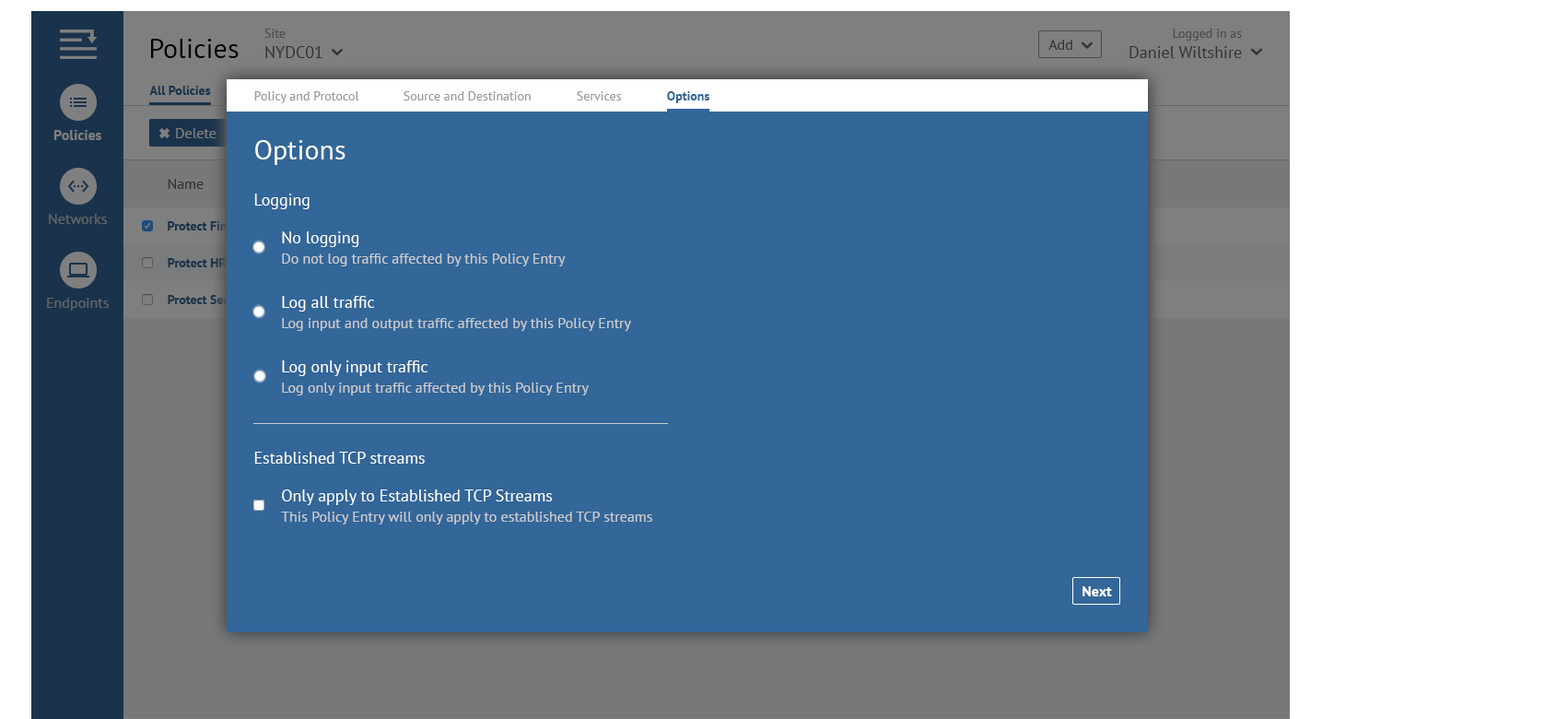
<style>
.page{position:relative;width:1568px;height:719px;background:#336699}
.page>*{position:absolute;margin:0}
.t1{font:16.6px "PTSans-Regular"}
.t2{font:12.9px "PTSans-Regular"}
.t3{font:16.8px "PTSans-Regular"}
.t4{font:13.1px "PTSans-Regular"}
.t5{font:27.6px "PTSans-Regular";color:#000000}
.t6{font:14.7px "PTSans-Regular";color:#333333}
.t7{font:12.8px "PTSans-Bold";color:#19334c}
.t8{font:12.8px "PTSans-Regular";color:#999999}
.t9{font:12.8px "PTSans-Bold";color:#336699}
.t10{font:14.7px "PTSans-Bold";color:#7f7f7f}
.t11{font:14.7px "PTSans-Regular";color:#7f7f7f}
.t12{font:27.6px "PTSans-Regular";color:#ffffff}
.t13{font:16.6px "PTSans-Regular";color:#ffffff}
.t14{font:14.7px "PTSans-Regular";color:#666666}
.t15{font:12.9px "PTSans-Bold"}
.t16{font:12.9px "PTSans-Bold";color:#19334c}
.t17{font:14.7px "PTSans-Regular";color:#cccccc}
.t18{font:14.7px "PTSans-Bold";color:#ffffff}
</style>
<div class="page">
<p class="t1" style="left:264px;top:29px;width:58px;height:29px"><span class="t2">Site<br></span>NYDC01</p>
<p class="t3" style="left:1129px;top:29px;width:113px;height:29px;text-align:right"><span class="t4">Logged in as<br></span>Daniel Wiltshire</p>
<p class="t5" style="left:151px;top:39px;width:88px;height:19px">Policies</p>
<p class="t6" style="left:1048px;top:40px;width:24px;height:10px">Add</p>
<p class="t7" style="left:149px;top:86px;width:62px;height:9px">All Policies</p>
<p class="t8" style="left:254px;top:91px;width:105px;height:12px">Policy and Protocol</p>
<p class="t8" style="left:404px;top:91px;width:127px;height:9px">Source and Destination</p>
<p class="t8" style="left:577px;top:91px;width:45px;height:9px">Services</p>
<p class="t9" style="left:667px;top:91px;width:43px;height:12px">Options</p>
<p class="t10" style="left:53px;top:130px;width:48px;height:10px">Policies</p>
<p class="t11" style="left:176px;top:128px;width:40px;height:10px">Delete</p>
<p class="t12" style="left:255px;top:140px;width:90px;height:25px">Options</p>
<p class="t6" style="left:168px;top:179px;width:36px;height:10px">Name</p>
<p class="t13" style="left:254px;top:193px;width:56px;height:16px">Logging</p>
<p class="t14" style="left:49px;top:214px;width:58px;height:10px">Networks</p>
<p class="t15" style="left:168px;top:221px;width:84px;height:9px">Protect Finance</p>
<p class="t13" style="left:282px;top:231px;width:77px;height:16px">No logging</p>
<p class="t16" style="left:168px;top:258px;width:59px;height:9px">Protect HR</p>
<p class="t17" style="left:282px;top:253px;width:284px;height:13px">Do not log traffic affected by this Policy Entry</p>
<p class="t14" style="left:47px;top:298px;width:62px;height:12px">Endpoints</p>
<p class="t15" style="left:168px;top:295px;width:83px;height:9px">Protect Servers</p>
<p class="t13" style="left:282px;top:296px;width:92px;height:15px">Log all traffic</p>
<p class="t17" style="left:282px;top:318px;width:349px;height:13px">Log input and output traffic affected by this Policy Entry</p>
<p class="t13" style="left:282px;top:360px;width:145px;height:16px">Log only input traffic</p>
<p class="t17" style="left:282px;top:382px;width:307px;height:13px">Log only input traffic affected by this Policy Entry</p>
<p class="t13" style="left:254px;top:451px;width:171px;height:12px">Established TCP streams</p>
<p class="t13" style="left:282px;top:489px;width:271px;height:16px">Only apply to Established TCP Streams</p>
<p class="t17" style="left:281px;top:511px;width:371px;height:13px">This Policy Entry will only apply to established TCP streams</p>
<p class="t18" style="left:1082px;top:586px;width:30px;height:10px">Next</p>
</div>
